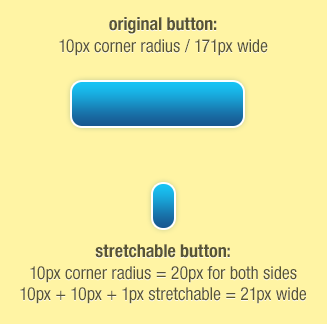
<style>
.page{position:relative;width:327px;height:324px;background:#fff4a4}
.page>*{position:absolute;margin:0}
.t1{font:18px "HelveticaNeueLTStd-Cn";color:#585435}
.t2{font:18px "HelveticaNeueLTStd-BdCn";color:#585435}
</style>
<div class="page">
<p class="t1" style="left:59px;top:17px;width:209px;height:39px;text-align:center"><span class="t2">original button:</span><br>10px corner radius / 171px wide</p>
<p class="t1" style="left:20px;top:244px;width:286px;height:60px;text-align:center"><span class="t2">stretchable button:<br></span>10px corner radius = 20px for both sides<br>10px + 10px + 1px stretchable = 21px wide</p>
</div>
